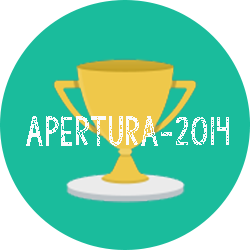
<style>
.page{position:relative;width:250px;height:250px;background:#1abc9c}
.page>*{position:absolute;margin:0}
.t1{font:33.3px "KGAllofMe";color:#fbfcfd}
</style>
<div class="page">
<p class="t1" style="left:26px;top:116px;width:203px;height:30px">Apertura-2014</p>
</div>
